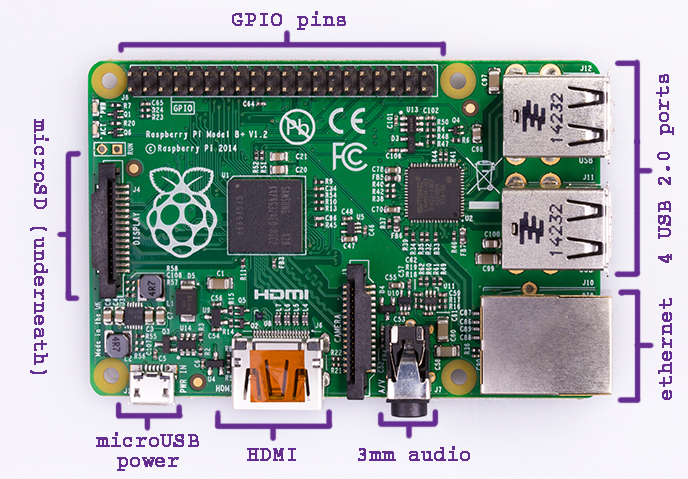
<style>
.page{position:relative;width:688px;height:479px}
.page>*{position:absolute;margin:0}
.t1{font:20px "Courier";color:#662d91;font-weight:bold}
.t2{font:20px/20px "Courier";color:#662d91;font-weight:bold}
</style>
<div class="page">
<p class="t1" style="left:232px;top:11px;width:114px;height:19px">GPIO pins</p>
<p class="t1" style="left:656px;top:74px;width:18px;height:189px;rotate:-91deg">4 USB 2.0 ports</p>
<p class="t1" style="left:30px;top:119px;width:19px;height:255px;rotate:90deg">microSD (underneath)</p>
<p class="t1" style="left:658px;top:298px;width:14px;height:102px;rotate:-90deg">ethernet</p>
<p class="t2" style="left:96px;top:432px;width:103px;height:39px;text-align:center">microUSB<br>power</p>
<p class="t1" style="left:247px;top:448px;width:49px;height:13px">HDMI</p>
<p class="t1" style="left:358px;top:446px;width:112px;height:15px">3mm audio</p>
</div>
